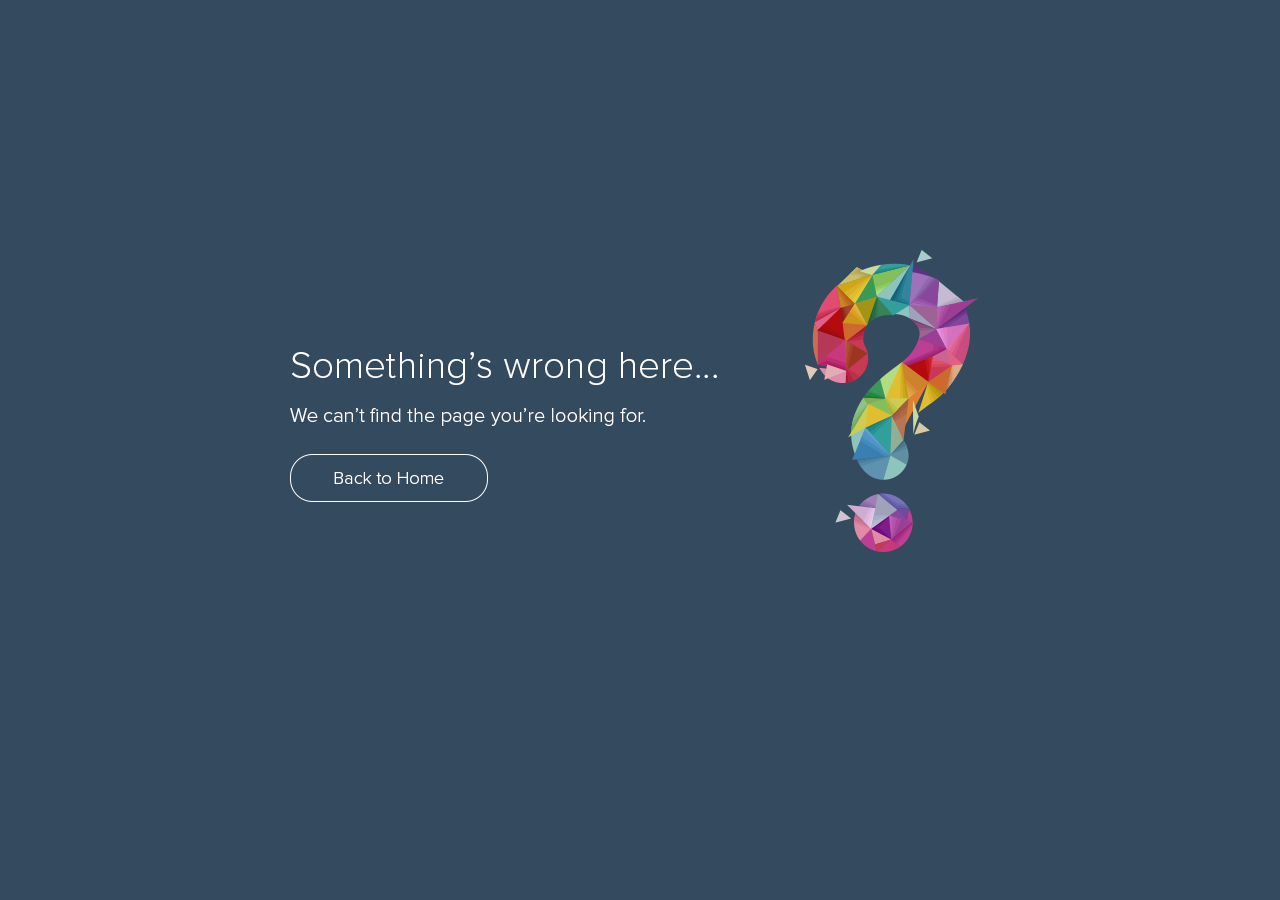
<style>
.page{position:relative;width:1280px;height:900px;background:#344a5f}
.page>*{position:absolute;margin:0}
.t1{font:38px "ProximaNova-Light";letter-spacing:0.005em;color:#ffffff}
.t2{font:20px "ProximaNova-Light";letter-spacing:0.005em;color:#ffffff}
.t3{font:18px "ProximaNova-Light";letter-spacing:0.005em;color:#ffffff}
</style>
<div class="page">
<p class="t1" style="left:292px;top:352px;width:425px;height:33px">Something’s wrong here...</p>
<p class="t2" style="left:290px;top:408px;width:355px;height:18px">We can’t find the page you’re looking for.</p>
<p class="t3" style="left:334px;top:472px;width:110px;height:12px">Back to Home</p>
</div>
